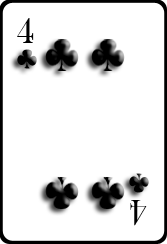
<style>
.page{position:relative;width:167px;height:244px;background:#ffffff}
.page>*{position:absolute;margin:0}
.t1{font:37px "BaskOldFace";color:#000000}
</style>
<div class="page">
<p class="t1" style="left:17px;top:18px;width:17px;height:25px">4</p>
<p class="t1" style="left:130px;top:200px;width:17px;height:26px;rotate:-180deg">4</p>
</div>
